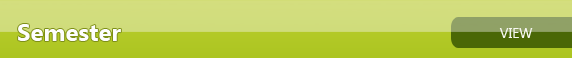
<style>
.page{position:relative;width:572px;height:58px}
.page>*{position:absolute;margin:0}
.t1{font:24px "SegoeUI-Bold";color:#fefefe}
.t2{font:14px "SegoeUI";color:#f6f7f1}
</style>
<div class="page">
<p class="t1" style="left:18px;top:24px;width:103px;height:17px">Semester</p>
<p class="t2" style="left:499px;top:28px;width:34px;height:10px">VIEW</p>
</div>
